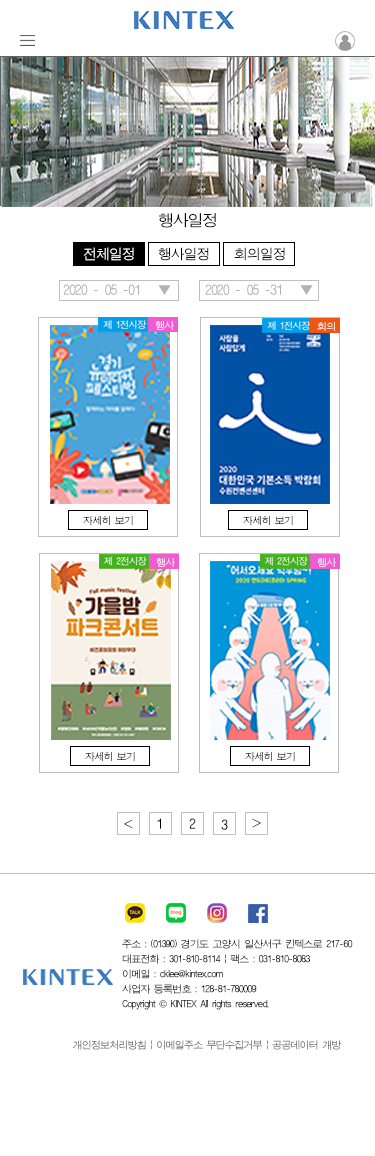
<style>
.page{position:relative;width:375px;height:1156px;background:#ffffff}
.page>*{position:absolute;margin:0}
.t1{font:16px "ÈÞ¸Õ°íµñ";letter-spacing:-0.08em;color:#060606}
.t2{font:14px "ÈÞ¸Õ°íµñ";letter-spacing:-0.08em;color:#fefefe}
.t3{font:14px "ÈÞ¸Õ°íµñ";letter-spacing:-0.08em;color:#020202}
.t4{font:14px "ÈÞ¸Õ°íµñ";letter-spacing:-0.08em;color:#b2b2b2}
.t5{font:10px "ÈÞ¸Õ°íµñ";letter-spacing:-0.08em}
.t6{font:14px "ÈÞ¸Õ°íµñ";letter-spacing:-0.08em;color:#040404}
.t7{font:10px/15px "ÈÞ¸Õ°íµñ";letter-spacing:-0.08em;color:#020202}
.t8{font:10px/15px "Gulim";letter-spacing:-0.08em;color:#020202}
</style>
<div class="page">
<p class="t1" style="left:159px;top:213px;width:57px;height:15px">행사일정</p>
<p class="t2" style="left:83px;top:247px;width:51px;height:14px">전체일정</p>
<p class="t3" style="left:158px;top:247px;width:51px;height:14px">행사일정</p>
<p class="t3" style="left:234px;top:247px;width:51px;height:14px">회의일정</p>
<p class="t4" style="left:63px;top:284px;width:108px;height:11px">2020 - 05 -01   ▼</p>
<p class="t4" style="left:205px;top:284px;width:108px;height:11px">2020 - 05 -31   ▼</p>
<p class="t5" style="left:317px;top:322px;width:18px;height:9px">회의</p>
<p class="t6" style="left:157px;top:818px;width:4px;height:11px">1</p>
<p class="t6" style="left:189px;top:818px;width:7px;height:11px">2</p>
<p class="t6" style="left:221px;top:819px;width:7px;height:11px">3</p>
<p class="t7" style="left:122px;top:939px;width:231px;height:71px">주소 : (01390) 경기도 고양시 일산서구 킨텍스로 217-60<br>대표전화 : 301-810-8114 | 팩스 : 031-810-8083<br>이메일 : cklee@kintex.com <br>사업자 등록번호 : 128-81-780009<br>Copyright <span class="t8">©</span> KINTEX All rights reserved.</p>
<p class="t5" style="left:72px;top:1040px;width:269px;height:10px">개인정보처리방침 | 이메일주소 무단수집거부 | 공공데이터 개방</p>
</div>
